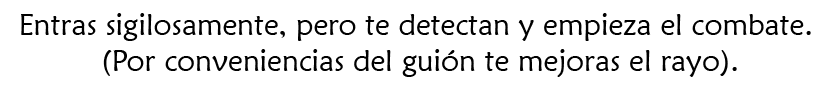
<style>
.page{position:relative;width:829px;height:89px;background:#ffffff}
.page>*{position:absolute;margin:0}
.t1{font:30px "MaiandraGD-Regular";color:#000000}
</style>
<div class="page">
<p class="t1" style="left:21px;top:13px;width:790px;height:64px;text-align:center">Entras sigilosamente, pero te detectan y empieza el combate. <br>(Por conveniencias del guión te mejoras el rayo).</p>
</div>
